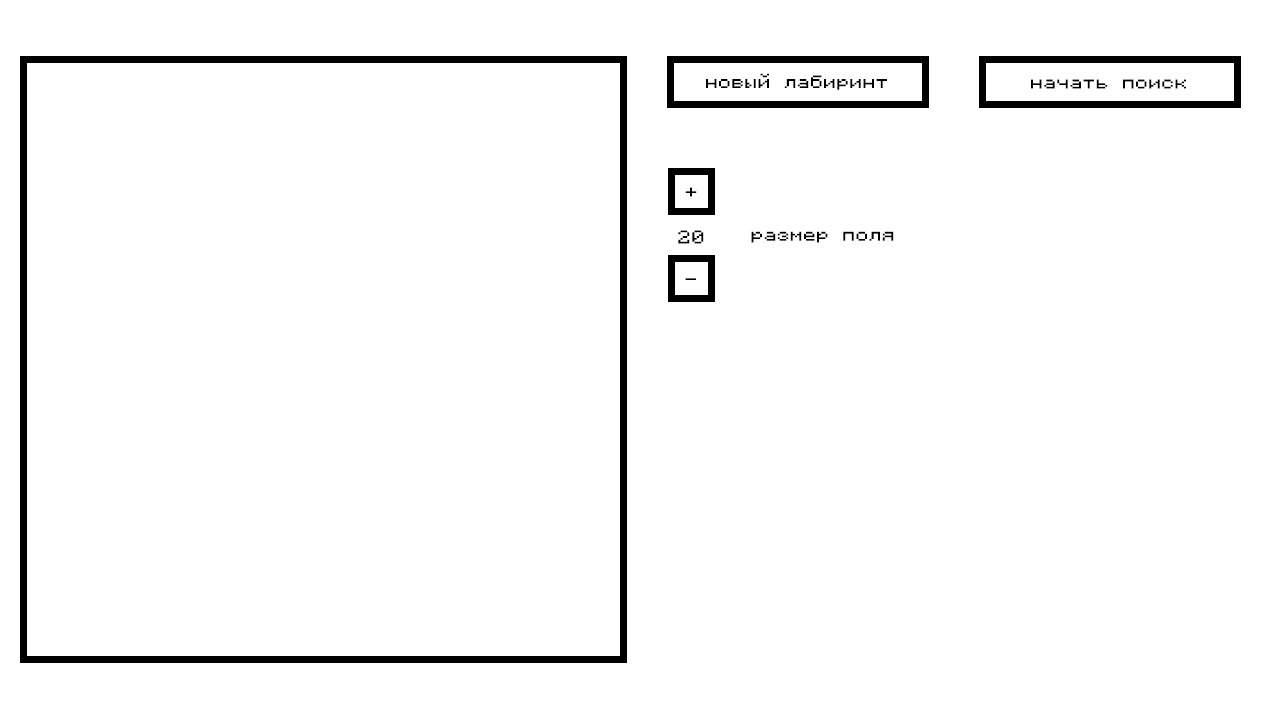
<style>
.page{position:relative;width:1280px;height:720px;background:#ffffff}
.page>*{position:absolute;margin:0}
.t1{font:16px "Monocraft";letter-spacing:0.025em;color:#000000;scale:1.19 1}
.t2{font:16.9px "Monocraft";letter-spacing:0.025em;color:#000000;scale:1.19 1}
</style>
<div class="page">
<p class="t1" style="left:706px;top:73px;width:181px;height:17px">новый лабиринт</p>
<p class="t1" style="left:1031px;top:79px;width:155px;height:10px">начать поиск</p>
<p class="t1" style="left:685px;top:187px;width:12px;height:10px">+</p>
<p class="t2" style="left:678px;top:230px;width:26px;height:14px">20</p>
<p class="t1" style="left:751px;top:231px;width:143px;height:12px">размер поля</p>
<p class="t1" style="left:685px;top:278px;width:11px;height:2px">-</p>
</div>
